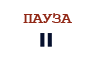
<style>
.page{position:relative;width:90px;height:62px;background:#ffffff}
.page>*{position:absolute;margin:0}
.t1{font:16px "CourierNewPS-BoldMT";color:#912816}
</style>
<div class="page">
<p class="t1" style="left:23px;top:13px;width:49px;height:10px">ПАУЗА</p>
</div>
